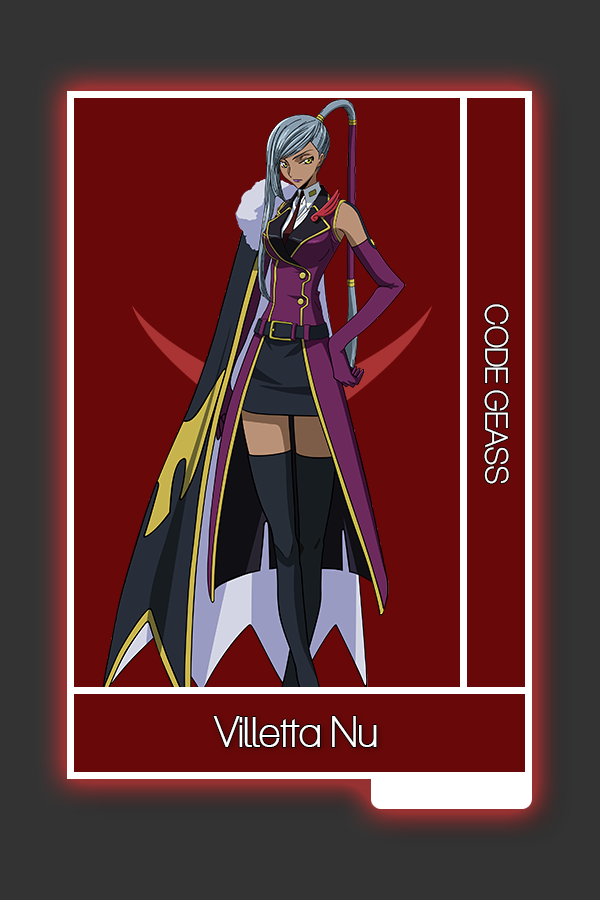
<style>
.page{position:relative;width:600px;height:900px;background:#680808}
.page>*{position:absolute;margin:0}
.t1{font:31.2px "Aliquam";color:#ffffff}
.t2{font:43.2px "Aliquam";color:#ffffff}
</style>
<div class="page">
<p class="t1" style="left:484px;top:304px;width:25px;height:180px;rotate:90deg">CODE GEASS</p>
<p class="t2" style="left:213px;top:716px;width:164px;height:31px">Villetta Nu</p>
</div>
